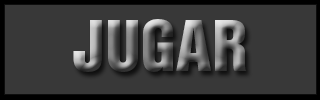
<style>
.page{position:relative;width:320px;height:100px;background:#383838}
.page>*{position:absolute;margin:0}
.t1{font:64.2px "HelveticaInseratLTStd-Roman"}
</style>
<div class="page">
<p class="t1" style="left:73px;top:19px;width:174px;height:53px">JUGAR</p>
</div>
